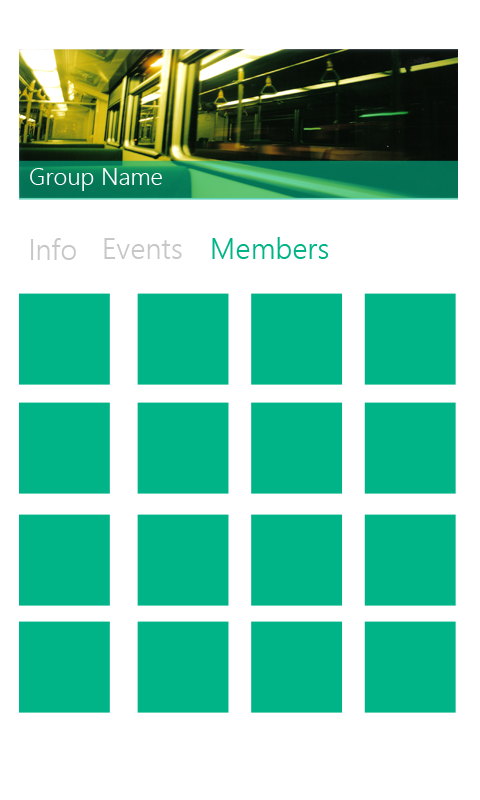
<style>
.page{position:relative;width:480px;height:800px;background:#ffffff}
.page>*{position:absolute;margin:0}
.t1{font:24px "SegoeUI-Semilight";color:#ffffff}
.t2{font:29.4px "SegoeUI-Semilight";color:#c7c7c7}
.t3{font:29.4px "SegoeUI-Semilight";color:#00b487}
</style>
<div class="page">
<p class="t1" style="left:30px;top:168px;width:132px;height:23px">Group Name</p>
<p class="t2" style="left:31px;top:238px;width:45px;height:22px">Info</p>
<p class="t2" style="left:104px;top:238px;width:78px;height:21px">Events</p>
<p class="t3" style="left:212px;top:237px;width:117px;height:22px">Members</p>
</div>
